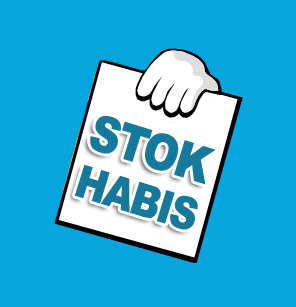
<style>
.page{position:relative;width:296px;height:307px;background:#06a5dd}
.page>*{position:absolute;margin:0}
.t1{font:50.1px "Arial-Black";letter-spacing:-0.05em;color:#15799c;scale:0.85 1}
.t2{font:44.9px "Arial-Black";letter-spacing:-0.05em;color:#15799c;scale:0.85 1}
</style>
<div class="page">
<p class="t1" style="left:90px;top:115px;width:126px;height:70px;rotate:17deg">STOK</p>
<p class="t2" style="left:75px;top:164px;width:123px;height:66px;rotate:17deg">HABIS</p>
</div>
